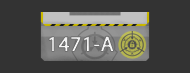
<style>
.page{position:relative;width:190px;height:73px;background:#333333}
.page>*{position:absolute;margin:0}
.t1{font:21.5px "MyriadPro-Regular";font-weight:bold}
</style>
<div class="page">
<p class="t1" style="left:48px;top:36px;width:66px;height:16px">1471-A</p>
</div>
